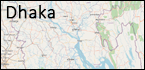
<style>
.page{position:relative;width:145px;height:70px}
.page>*{position:absolute;margin:0}
.t1{font:19.3px "Calibri-Light";color:#000000;font-weight:bold}
</style>
<div class="page">
<p class="t1" style="left:6px;top:5px;width:49px;height:14px">Dhaka</p>
</div>
